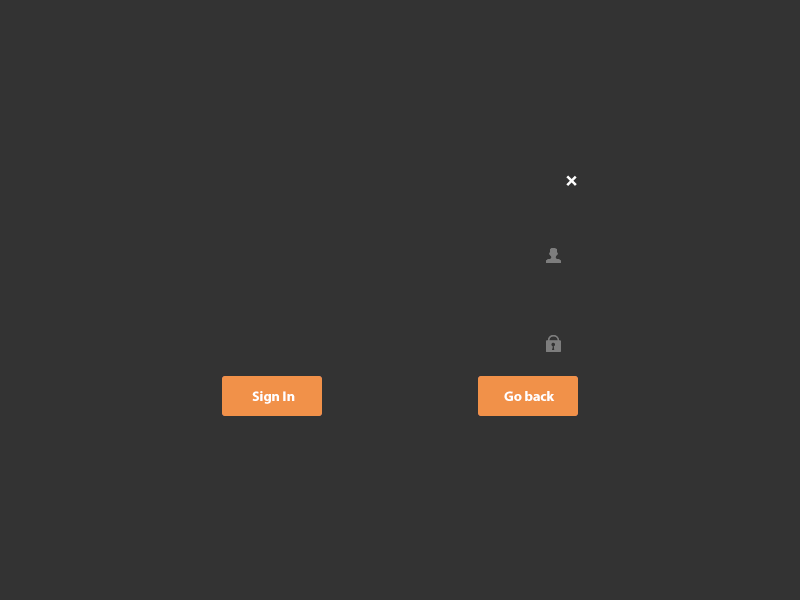
<style>
.page{position:relative;width:800px;height:600px;background:#333333}
.page>*{position:absolute;margin:0}
.t1{font:24px "HelveticaNeue-Bold";color:#ffffff}
.t2{font:14px "MyriadPro-Bold";color:#ffffff}
</style>
<div class="page">
<p class="t1" style="left:566px;top:175px;width:11px;height:11px;rotate:45deg">+</p>
<p class="t2" style="left:252px;top:391px;width:43px;height:13px">Sign In</p>
<p class="t2" style="left:504px;top:391px;width:51px;height:10px">Go back</p>
</div>
